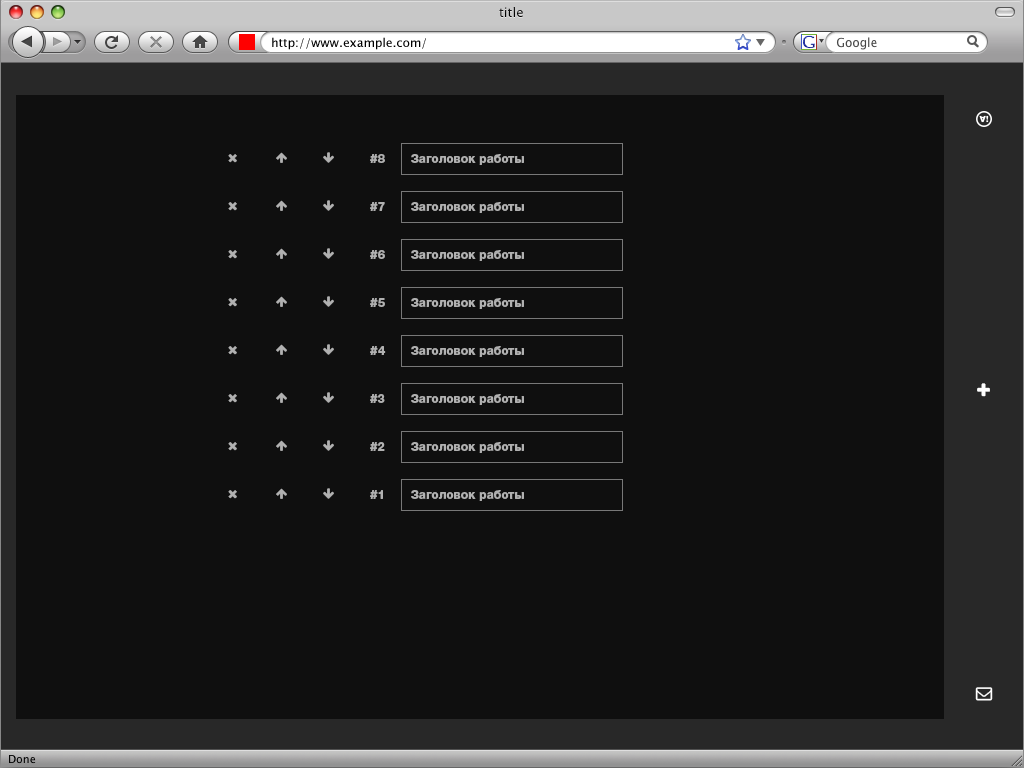
<style>
.page{position:relative;width:1024px;height:768px;background:#0f0f0f}
.page>*{position:absolute;margin:0}
.t1{font:12px "HelveticaNeueCyr-Heavy";color:#b1b1b1}
</style>
<div class="page">
<p class="t1" style="left:370px;top:154px;width:15px;height:9px">#8</p>
<p class="t1" style="left:411px;top:154px;width:113px;height:11px">Заголовок работы</p>
<p class="t1" style="left:370px;top:202px;width:15px;height:9px">#7</p>
<p class="t1" style="left:411px;top:202px;width:113px;height:11px">Заголовок работы</p>
<p class="t1" style="left:370px;top:250px;width:15px;height:9px">#6</p>
<p class="t1" style="left:411px;top:250px;width:113px;height:11px">Заголовок работы</p>
<p class="t1" style="left:370px;top:298px;width:15px;height:9px">#5</p>
<p class="t1" style="left:411px;top:298px;width:113px;height:11px">Заголовок работы</p>
<p class="t1" style="left:370px;top:346px;width:16px;height:9px">#4</p>
<p class="t1" style="left:411px;top:346px;width:113px;height:11px">Заголовок работы</p>
<p class="t1" style="left:370px;top:394px;width:15px;height:9px">#3</p>
<p class="t1" style="left:411px;top:394px;width:113px;height:11px">Заголовок работы</p>
<p class="t1" style="left:370px;top:442px;width:15px;height:9px">#2</p>
<p class="t1" style="left:411px;top:442px;width:113px;height:11px">Заголовок работы</p>
<p class="t1" style="left:370px;top:490px;width:13px;height:9px">#1</p>
<p class="t1" style="left:411px;top:490px;width:113px;height:11px">Заголовок работы</p>
</div>
